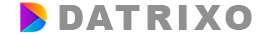
<style>
.page{position:relative;width:270px;height:35px;background:#ffffff}
.page>*{position:absolute;margin:0}
.t1{font:35px "Arial-Black";letter-spacing:0.12em;color:#909090}
</style>
<div class="page">
<p class="t1" style="left:59px;top:5px;width:193px;height:25px">DATRIXO</p>
</div>
